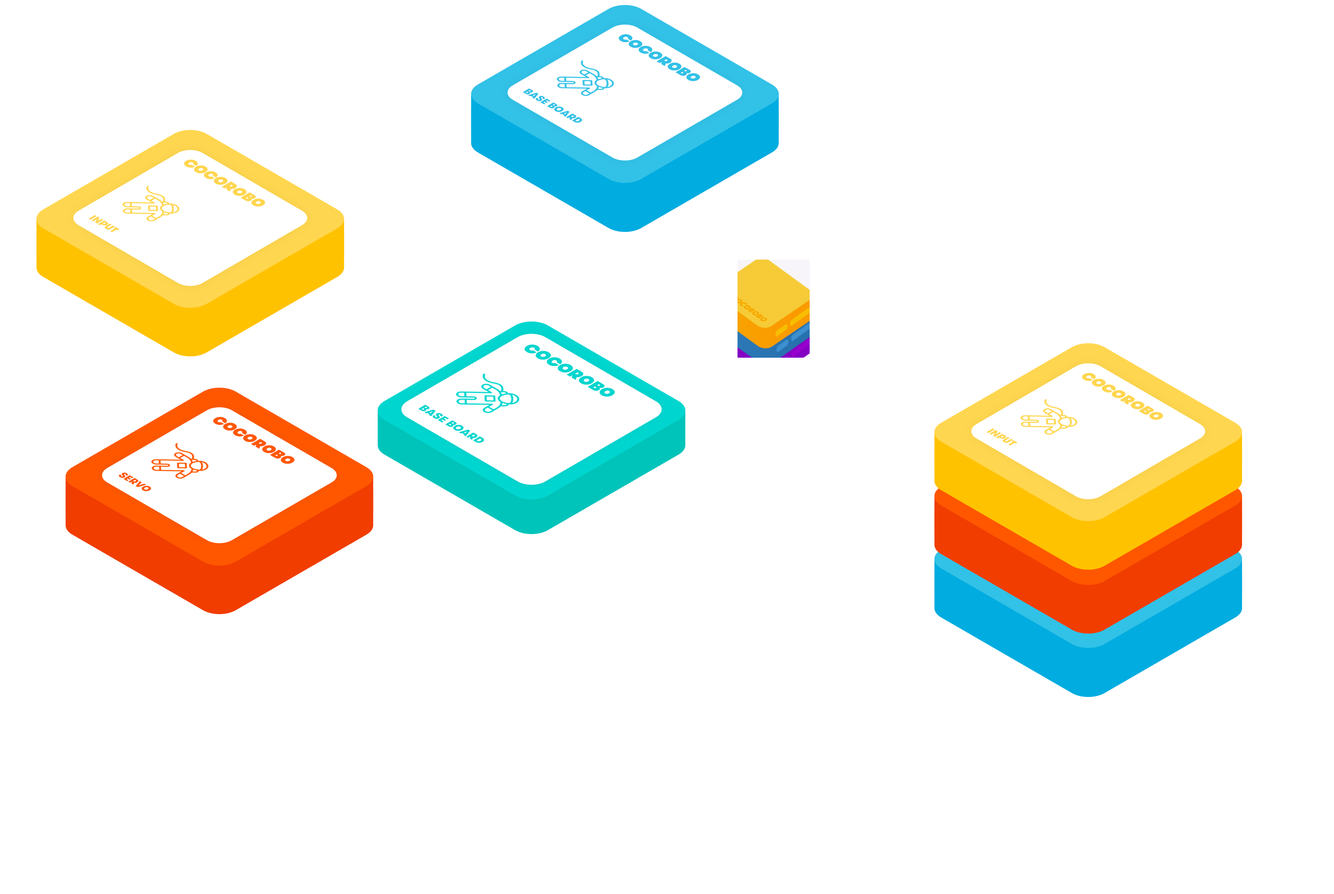
<style>
.page{position:relative;width:1334px;height:894px;background:#ffffff}
.page>*{position:absolute;margin:0}
.t1{font:15px "GTWalsheimProTrialUltra-Bold";color:#32c1e7;scale:0.94 1}
.t2{font:10.4px "GTWalsheimProTrial-Black";color:#32c1e7;scale:0.94 1}
.t3{font:15px "GTWalsheimProTrialUltra-Bold";color:#ffd64f;scale:0.94 1}
.t4{font:10.4px "GTWalsheimProTrial-Black";color:#ffd64f;scale:0.94 1}
.t5{font:16.6px "GTWalsheimProTrialUltra-Bold";color:#00d6cf;scale:0.94 1}
.t6{font:11.6px "GTWalsheimProTrial-Black";color:#00d6cf;scale:0.94 1}
.t7{font:15px "GTWalsheimProTrialUltra-Bold";color:#ff5700;scale:0.94 1}
.t8{font:10.4px "GTWalsheimProTrial-Black";color:#ff5700;scale:0.94 1}
</style>
<div class="page">
<p class="t1" style="left:619px;top:34px;width:81px;height:47px;rotate:30deg">COCOROBO</p>
<p class="t2" style="left:523px;top:88px;width:59px;height:35px;rotate:30deg">BASE BOARD</p>
<p class="t3" style="left:184px;top:160px;width:81px;height:47px;rotate:30deg">COCOROBO</p>
<p class="t4" style="left:88px;top:215px;width:32px;height:17px;rotate:30deg">INPUT</p>
<p class="t5" style="left:525px;top:344px;width:90px;height:52px;rotate:30deg">COCOROBO</p>
<p class="t6" style="left:418px;top:404px;width:66px;height:39px;rotate:30deg">BASE BOARD</p>
<p class="t7" style="left:213px;top:417px;width:82px;height:47px;rotate:30deg">COCOROBO</p>
<p class="t8" style="left:119px;top:472px;width:32px;height:19px;rotate:30deg">SERVO</p>
</div>
